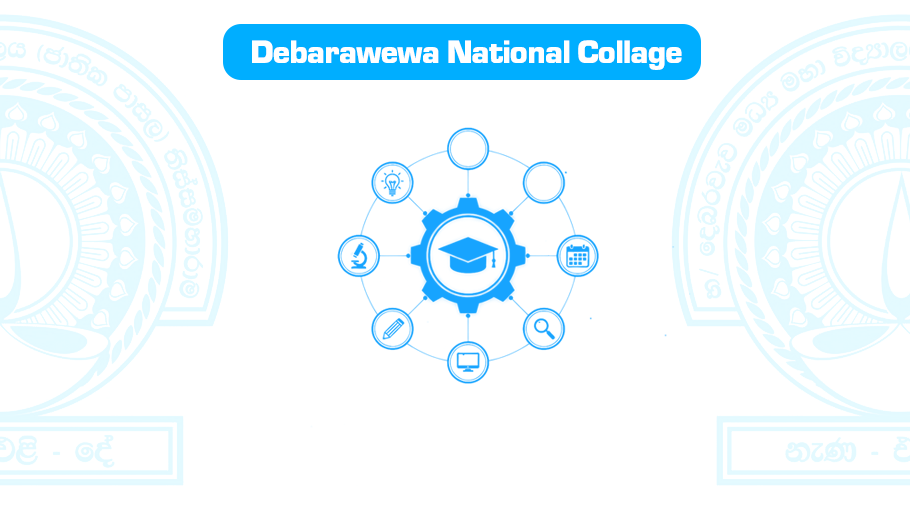
<style>
.page{position:relative;width:910px;height:505px;background:#ffffff}
.page>*{position:absolute;margin:0}
.t1{font:33.3px "EurostileTBlack";letter-spacing:-0.015em;color:#ffffff}
</style>
<div class="page">
<p class="t1" style="left:252px;top:40px;width:430px;height:30px">Debarawewa National Collage</p>
</div>
